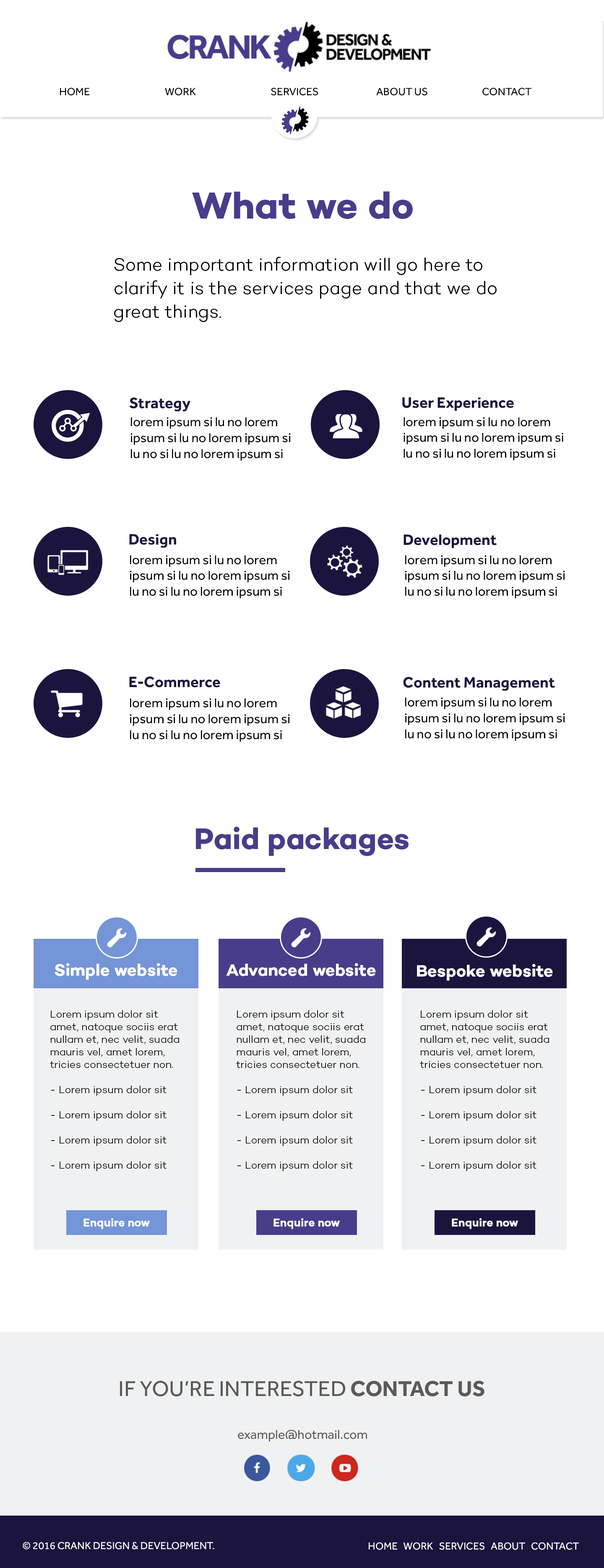
<style>
.page{position:relative;width:604px;height:1568px;background:#ffffff}
.page>*{position:absolute;margin:0}
.t1{font:10.9px "Effra-Regular";color:#000000}
.t2{font:38.2px "Campton-BoldDEMO";color:#483d8b}
.t3{font:18px/23.5px "Campton-LightDEMO";color:#000000}
.t4{font:15.6px "Effra-Bold";color:#1b153e}
.t5{font:13.2px "Effra-Regular";color:#000001}
.t6{font:13.2px "Effra-Regular";color:#000000}
.t7{font:30.2px "Campton-BoldDEMO";color:#483d8b}
.t8{font:16.8px "Campton-BoldDEMO";color:#ffffff}
.t9{font:10.5px "Campton-LightDEMO";color:#000000}
.t10{font:11.3px "Campton-BoldDEMO";color:#ffffff}
.t11{font:22.2px "Effra-Regular";color:#5a5a5a;text-transform:uppercase}
.t12{font:22.2px "Effra-Bold";color:#5a5a5a;text-transform:uppercase}
.t13{font:13px "Effra-Regular";color:#5a5a5a}
.t14{font:10.5px "Effra-Regular";color:#ffffff}
</style>
<div class="page">
<p class="t1" style="left:60px;top:88px;width:471px;height:8px">HOME     WORK     SERVICES    ABOUT US    CONTACT</p>
<p class="t2" style="left:192px;top:191px;width:221px;height:28px">What we do</p>
<p class="t3" style="left:114px;top:257px;width:383px;height:65px">Some important information will go here to <br>clarify it is the services page and that we do great things.</p>
<p class="t4" style="left:129px;top:397px;width:62px;height:15px">Strategy</p>
<p class="t4" style="left:402px;top:397px;width:112px;height:14px">User Experience</p>
<p class="t5" style="left:130px;top:417px;width:161px;height:44px">lorem ipsum si lu no lorem ipsum si lu no lorem ipsum si lu no si lu no lorem ipsum si</p>
<p class="t6" style="left:404px;top:417px;width:159px;height:44px">lorem ipsum si lu no lorem ipsum si lu no lorem ipsum si lu no si lu no lorem ipsum si</p>
<p class="t4" style="left:129px;top:534px;width:47px;height:14px">Design</p>
<p class="t4" style="left:404px;top:534px;width:93px;height:14px">Development</p>
<p class="t6" style="left:130px;top:555px;width:160px;height:44px">lorem ipsum si lu no lorem ipsum si lu no lorem ipsum si lu no si lu no lorem ipsum si</p>
<p class="t6" style="left:405px;top:555px;width:160px;height:44px">lorem ipsum si lu no lorem ipsum si lu no lorem ipsum si lu no si lu no lorem ipsum si</p>
<p class="t4" style="left:129px;top:676px;width:91px;height:12px">E-Commerce</p>
<p class="t4" style="left:403px;top:677px;width:152px;height:14px">Content Management</p>
<p class="t6" style="left:130px;top:698px;width:160px;height:44px">lorem ipsum si lu no lorem ipsum si lu no lorem ipsum si lu no si lu no lorem ipsum si</p>
<p class="t6" style="left:405px;top:698px;width:160px;height:43px">lorem ipsum si lu no lorem ipsum si lu no lorem ipsum si lu no si lu no lorem ipsum si</p>
<p class="t7" style="left:196px;top:826px;width:213px;height:30px">Paid packages</p>
<p class="t8" style="left:55px;top:963px;width:122px;height:17px">Simple website</p>
<p class="t8" style="left:226px;top:963px;width:150px;height:13px">Advanced website</p>
<p class="t8" style="left:417px;top:964px;width:136px;height:17px">Bespoke website</p>
<p class="t9" style="left:50px;top:1010px;width:129px;height:161px">Lorem ipsum dolor sit amet, natoque sociis erat nullam et, nec velit, suada mauris vel, amet lorem, tricies consectetuer non.<br><br>- Lorem ipsum dolor sit<br><br>- Lorem ipsum dolor sit<br><br>- Lorem ipsum dolor sit <br><br>- Lorem ipsum dolor sit</p>
<p class="t9" style="left:236px;top:1010px;width:129px;height:161px">Lorem ipsum dolor sit amet, natoque sociis erat nullam et, nec velit, suada mauris vel, amet lorem, tricies consectetuer non.<br><br>- Lorem ipsum dolor sit<br><br>- Lorem ipsum dolor sit<br><br>- Lorem ipsum dolor sit <br><br>- Lorem ipsum dolor sit</p>
<p class="t9" style="left:420px;top:1010px;width:129px;height:161px">Lorem ipsum dolor sit amet, natoque sociis erat nullam et, nec velit, suada mauris vel, amet lorem, tricies consectetuer non.<br><br>- Lorem ipsum dolor sit<br><br>- Lorem ipsum dolor sit<br><br>- Lorem ipsum dolor sit <br><br>- Lorem ipsum dolor sit</p>
<p class="t10" style="left:83px;top:1218px;width:67px;height:11px">Enquire now</p>
<p class="t10" style="left:273px;top:1218px;width:67px;height:11px">Enquire now</p>
<p class="t10" style="left:452px;top:1218px;width:66px;height:11px">Enquire now</p>
<p class="t11" style="left:120px;top:1380px;width:364px;height:16px">if you’re interested <span class="t12">Contact us</span></p>
<p class="t13" style="left:238px;top:1430px;width:129px;height:12px">example@hotmail.com</p>
<p class="t14" style="left:23px;top:1542px;width:191px;height:8px">© 2016 CRANK DESIGN &amp; DEVELOPMENT.</p>
<p class="t14" style="left:369px;top:1542px;width:210px;height:8px">HOME   WORK   SERVICES   ABOUT   CONTACT</p>
</div>
